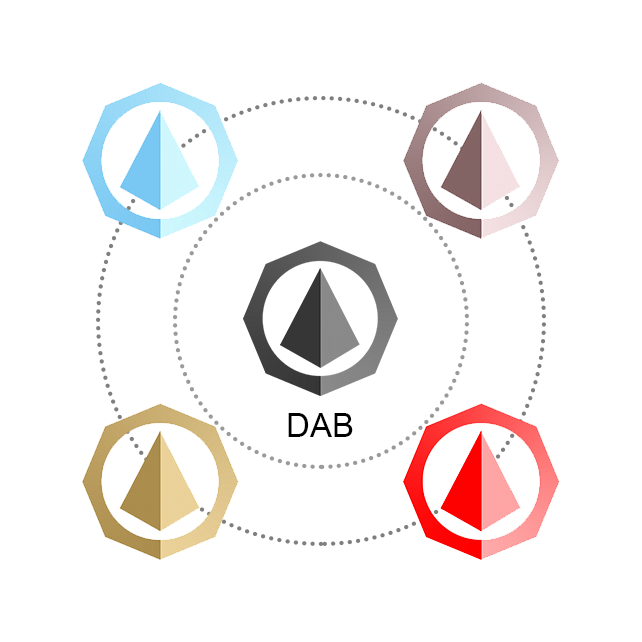
<style>
.page{position:relative;width:642px;height:642px;background:#ffffff}
.page>*{position:absolute;margin:0}
.t1{font:33.3px "ArialMT";color:#000000}
</style>
<div class="page">
<p class="t1" style="left:288px;top:413px;width:65px;height:24px">DAB</p>
</div>
